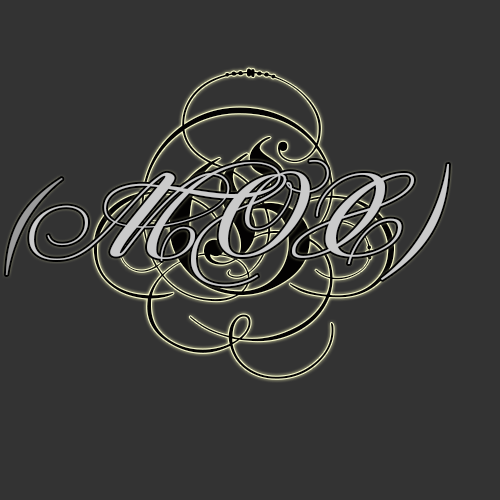
<style>
.page{position:relative;width:500px;height:500px;background:#333333}
.page>*{position:absolute;margin:0}
.t1{font:125.6px "PFChampionScriptPro-Bold";color:#cacaca}
.t2{font:104.7px "PFChampionScriptPro-Bold";color:#9b9b9b}
</style>
<div class="page">
<p class="t1" style="left:5px;top:160px;width:444px;height:127px"><span class="t2">(</span>MOX)</p>
</div>
